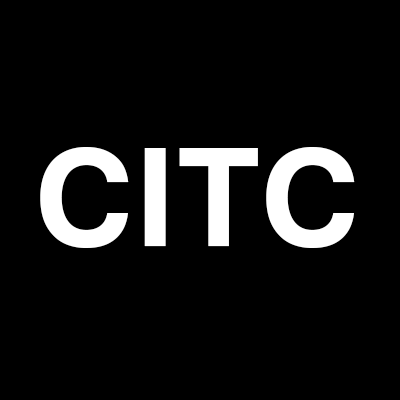
<style>
.page{position:relative;width:400px;height:400px;background:#000000}
.page>*{position:absolute;margin:0}
.t1{font:175px "Tunga-Bold";color:#ffffff}
</style>
<div class="page">
<p class="t1" style="left:40px;top:147px;width:315px;height:101px">CITC</p>
</div>
